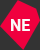
<style>
.page{position:relative;width:40px;height:50px;background:#f0003e}
.page>*{position:absolute;margin:0}
.t1{font:16px "Roboto-Bold";color:#fafafa}
</style>
<div class="page">
<p class="t1" style="left:11px;top:19px;width:19px;height:12px">NE</p>
</div>
